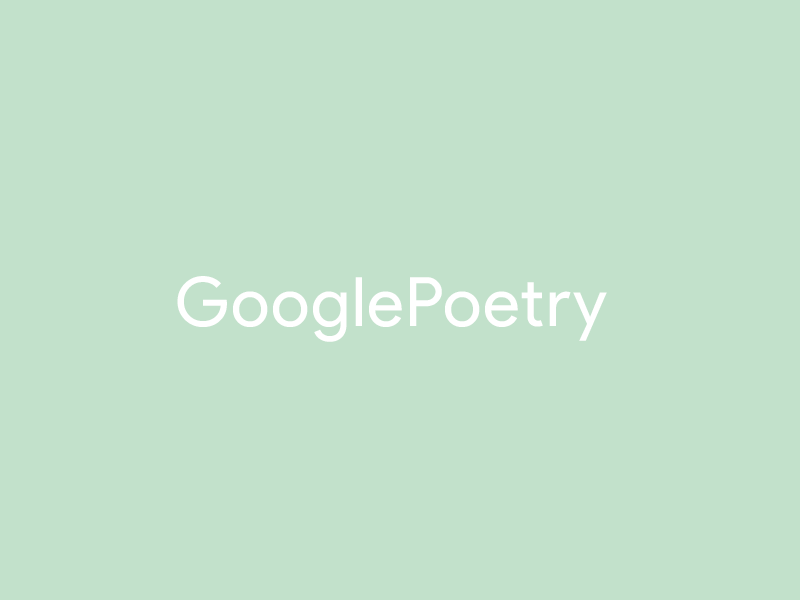
<style>
.page{position:relative;width:800px;height:600px;background:#c2e1cb}
.page>*{position:absolute;margin:0}
.t1{font:116.9px "ProductSans-Regular";letter-spacing:0.025em;color:#ffffff}
</style>
<div class="page">
<p class="t1" style="left:177px;top:276px;width:430px;height:66px">GooglePoetry</p>
</div>
